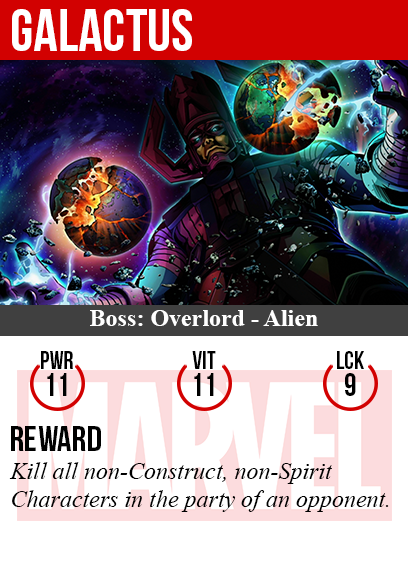
<style>
.page{position:relative;width:408px;height:585px;background:#ffffff}
.page>*{position:absolute;margin:0}
.t1{font:60px "BebasNeue";color:#ffffff}
.t2{font:24px "TimesNewRomanPS-BoldMT";color:#ffffff}
.t3{font:25px "BebasNeue";color:#000000}
.t4{font:32px "BebasNeue";color:#000000}
.t5{font:36px "BebasNeue";color:#000000}
.t6{font:24px "TimesNewRomanPS-ItalicMT";color:#000000}
</style>
<div class="page">
<p class="t1" style="left:12px;top:9px;width:180px;height:42px">galactus</p>
<p class="t2" style="left:90px;top:310px;width:228px;height:16px">Boss: Overlord - Alien</p>
<p class="t3" style="left:41px;top:351px;width:32px;height:18px">PWR</p>
<p class="t3" style="left:192px;top:351px;width:24px;height:18px">vit</p>
<p class="t3" style="left:337px;top:351px;width:27px;height:18px">lck</p>
<p class="t4" style="left:47px;top:373px;width:20px;height:23px">11</p>
<p class="t4" style="left:194px;top:373px;width:20px;height:23px">11</p>
<p class="t4" style="left:345px;top:373px;width:11px;height:23px">9</p>
<p class="t5" style="left:11px;top:426px;width:90px;height:25px">reward</p>
<p class="t6" style="left:9px;top:462px;width:380px;height:50px">Kill all non-Construct, non-Spirit<br>Characters in the party of an opponent.</p>
</div>
